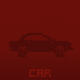
<style>
.page{position:relative;width:80px;height:80px;background:#680f0a}
.page>*{position:absolute;margin:0}
.t1{font:12px "hooge05_55Cyr2";color:#7b120c}
</style>
<div class="page">
<p class="t1" style="left:29px;top:69px;width:22px;height:8px">car</p>
<p class="t1" style="left:29px;top:69px;width:22px;height:8px">car</p>
</div>
